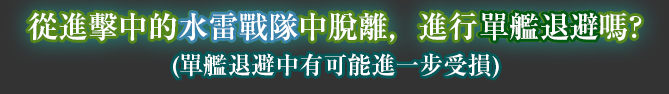
<style>
.page{position:relative;width:669px;height:94px;background:#333333}
.page>*{position:absolute;margin:0}
.t1{font:30px "RyuminPr6N-Bold";color:#ffffff}
.t2{font:24px "RyuminPr6N-Bold";color:#ffffff}
</style>
<div class="page">
<p class="t1" style="left:28px;top:12px;width:614px;height:30px">從進擊中的水雷戰隊中脫離，進行單艦退避嗎?</p>
<p class="t1" style="left:179px;top:12px;width:119px;height:29px">水雷戰隊</p>
<p class="t1" style="left:480px;top:12px;width:118px;height:29px">單艦退避</p>
<p class="t2" style="left:173px;top:53px;width:326px;height:25px">(單艦退避中有可能進一步受損)</p>
</div>
